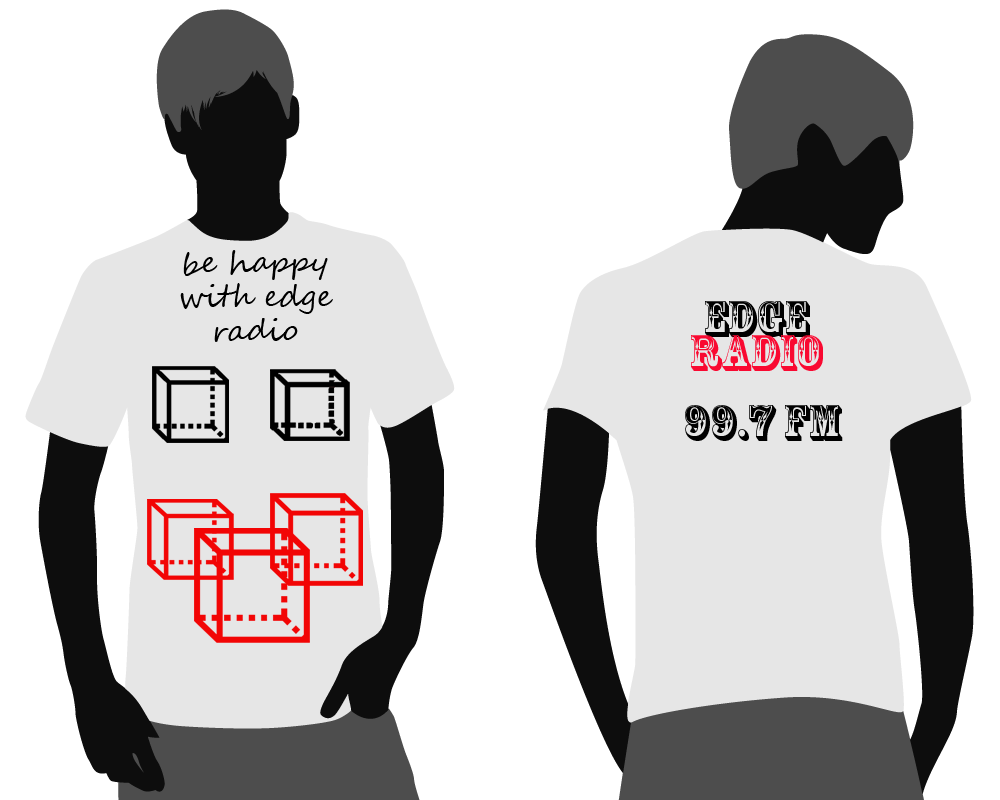
<style>
.page{position:relative;width:1000px;height:800px;background:#ffffff}
.page>*{position:absolute;margin:0}
.t1{font:30px/34px "SegoeScript";color:#000000}
.t2{font:48px "RosewoodStd-Regular";color:#f90931}
.t3{font:48px "RosewoodStd-Regular";color:#000000}
</style>
<div class="page">
<p class="t1" style="left:180px;top:250px;width:153px;height:92px;text-align:center">be happy with edge radio</p>
<p class="t2" style="left:691px;top:301px;width:132px;height:70px"><span class="t3">edge </span>radio</p>
<p class="t3" style="left:685px;top:405px;width:158px;height:36px">99.7 fm</p>
</div>
